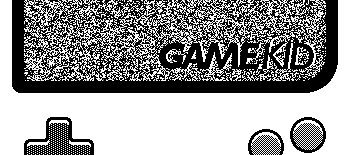
<style>
.page{position:relative;width:350px;height:155px;background:#ffffff}
.page>*{position:absolute;margin:0}
.t1{font:38px "GillSans-BoldItalic";letter-spacing:-0.06em;color:#000000}
.t2{font:38px "GillSans-SemiBoldItalic";letter-spacing:-0.06em;color:#000000}
</style>
<div class="page">
<p class="t1" style="left:159px;top:43px;width:155px;height:26px">GAME<span class="t2">KID</span></p>
</div>
